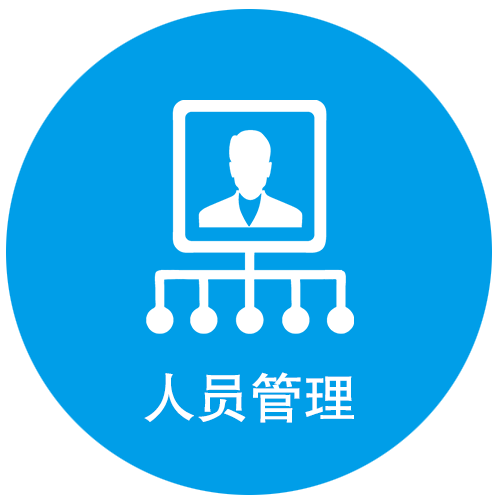
<style>
.page{position:relative;width:500px;height:500px;background:#009ee8}
.page>*{position:absolute;margin:0}
.t1{font:53.7px "FZHTJW--GB1-0";color:#ffffff}
</style>
<div class="page">
<p class="t1" style="left:144px;top:372px;width:210px;height:51px">人员管理</p>
</div>
